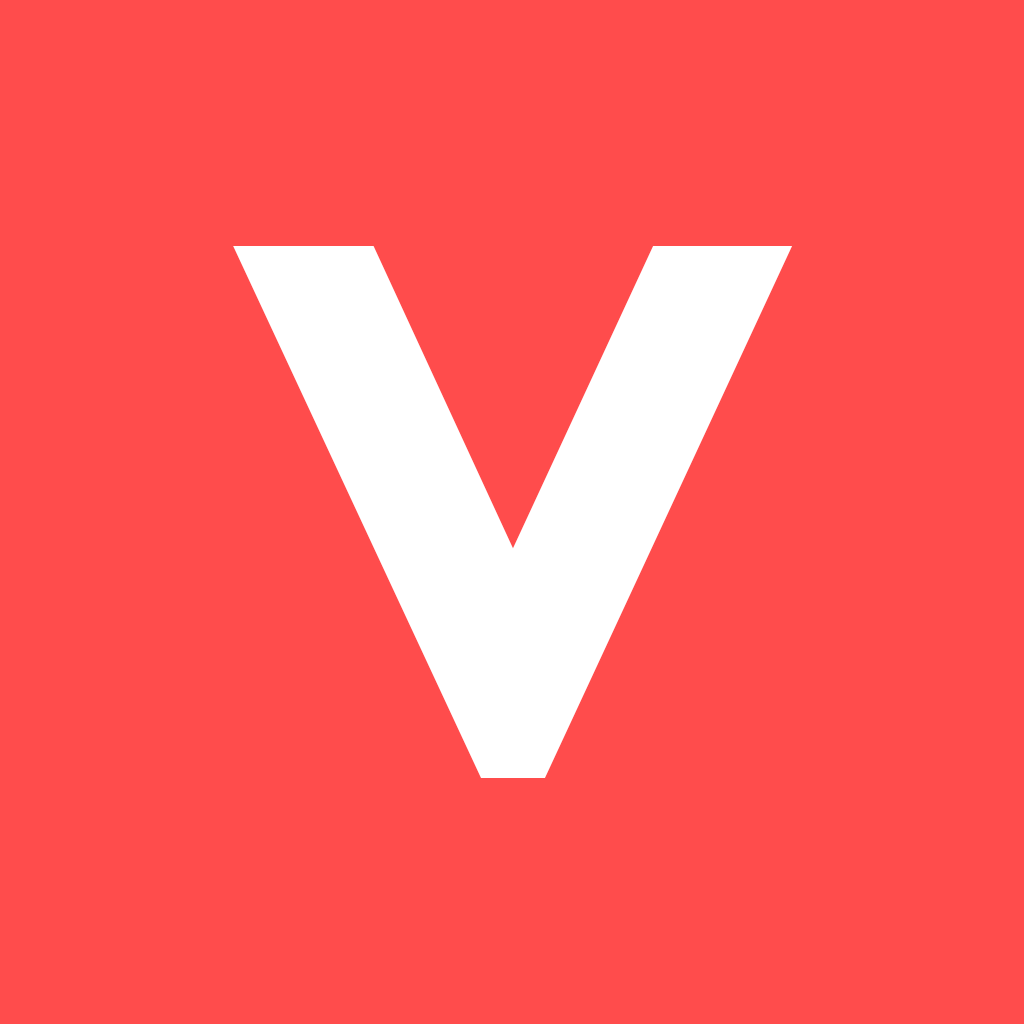
<style>
.page{position:relative;width:1024px;height:1024px;background:#ff4c4c}
.page>*{position:absolute;margin:0}
.t1{font:708.3px "BigJohnPRO-Bold";color:#ffffff}
</style>
<div class="page">
<p class="t1" style="left:233px;top:246px;width:559px;height:532px">V</p>
</div>
